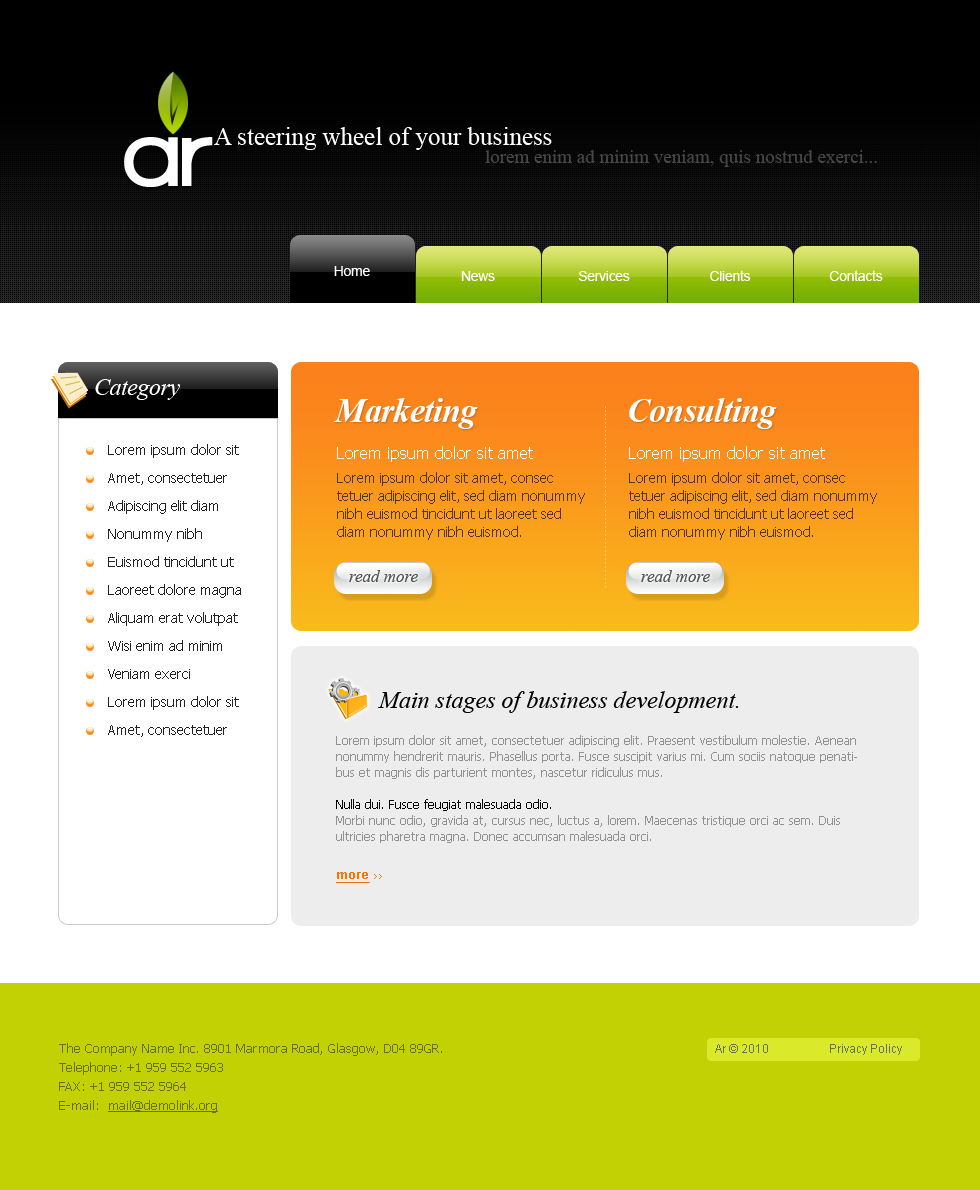
<style>
.page{position:relative;width:980px;height:1190px;background:#ffffff}
.page>*{position:absolute;margin:0}
.t1{font:98px "WalkwayBlack";color:#ffffff}
.t2{font:25px "TimesNewRomanPSMT";color:#ffffff}
.t3{font:19px "TimesNewRomanPSMT";color:#494949}
.t4{font:14px "ArialMT";letter-spacing:-0.02em;color:#ffffff}
.t5{font:24px "TimesNewRomanPS-ItalicMT";letter-spacing:-0.02em;color:#ffffff}
.t6{font:34px "TimesNewRomanPS-BoldItalicMT";letter-spacing:-0.02em;color:#ffffff}
.t7{font:14px/28px "Tahoma";color:#222222}
.t8{font:16px "Tahoma";color:#ffffff}
.t9{font:14px/18px "Tahoma";color:#503620}
.t10{font:17px "TimesNewRomanPS-ItalicMT";color:#555555}
.t11{font:24px "TimesNewRomanPS-ItalicMT";color:#000000}
.t12{font:12px/16px "Tahoma";color:#919191}
.t13{font:12px/16px "Tahoma";color:#000000}
.t14{font:13px "Arial-BoldMT";color:#fb7506;text-decoration:underline}
.t15{font:8px "Standard0754";color:#f08508;text-transform:uppercase}
.t16{font:13px/19px "Tahoma";color:#687004}
.t17{font:13px/19px "Tahoma";color:#687004;text-decoration:underline}
.t18{font:12px "ArialMT";color:#697546}
</style>
<div class="page">
<p class="t1" style="left:124px;top:137px;width:89px;height:50px">ar</p>
<p class="t2" style="left:214px;top:127px;width:338px;height:23px">A steering wheel of your business</p>
<p class="t3" style="left:485px;top:150px;width:392px;height:17px">lorem enim ad minim veniam, quis nostrud exerci...</p>
<p class="t4" style="left:334px;top:266px;width:36px;height:10px">Home</p>
<p class="t4" style="left:710px;top:270px;width:41px;height:11px">Clients</p>
<p class="t4" style="left:829px;top:270px;width:54px;height:11px">Contacts</p>
<p class="t4" style="left:461px;top:271px;width:34px;height:10px">News</p>
<p class="t4" style="left:578px;top:271px;width:52px;height:10px">Services</p>
<p class="t5" style="left:95px;top:379px;width:86px;height:21px">Category</p>
<p class="t6" style="left:333px;top:398px;width:145px;height:31px">Marketing</p>
<p class="t6" style="left:629px;top:398px;width:148px;height:31px">Consulting</p>
<p class="t7" style="left:108px;top:444px;width:133px;height:293px">Lorem ipsum dolor sit <br>Amet, consectetuer <br>Adipiscing elit diam <br>Nonummy nibh <br>Euismod tincidunt ut <br>Laoreet dolore magna <br>Aliquam erat volutpat <br>Wisi enim ad minim <br>Veniam exerci<br>Lorem ipsum dolor sit <br>Amet, consectetuer</p>
<p class="t8" style="left:337px;top:446px;width:196px;height:16px">Lorem ipsum dolor sit amet</p>
<p class="t8" style="left:629px;top:446px;width:196px;height:16px">Lorem ipsum dolor sit amet</p>
<p class="t9" style="left:337px;top:472px;width:248px;height:68px">Lorem ipsum dolor sit amet, consec<br>tetuer adipiscing elit, sed diam nonummy nibh euismod tincidunt ut laoreet sed diam nonummy nibh euismod.</p>
<p class="t9" style="left:629px;top:472px;width:248px;height:68px">Lorem ipsum dolor sit amet, consec<br>tetuer adipiscing elit, sed diam nonummy nibh euismod tincidunt ut laoreet sed diam nonummy nibh euismod.</p>
<p class="t10" style="left:349px;top:570px;width:69px;height:12px">read more</p>
<p class="t10" style="left:641px;top:570px;width:69px;height:12px">read more</p>
<p class="t11" style="left:378px;top:691px;width:361px;height:22px">Main stages of business development.</p>
<p class="t12" style="left:336px;top:735px;width:521px;height:108px">Lorem ipsum dolor sit amet, consectetuer adipiscing elit. Praesent vestibulum molestie. Aenean nonummy hendrerit mauris. Phasellus porta. Fusce suscipit varius mi. Cum sociis natoque penatibus et magnis dis parturient montes, nascetur ridiculus mus. <br><br><span class="t13">Nulla dui. Fusce feugiat malesuada odio.<br></span>Morbi nunc odio, gravida at, cursus nec, luctus a, lorem. Maecenas tristique orci ac sem. Duis ultricies pharetra magna. Donec accumsan malesuada orci.</p>
<p class="t14" style="left:336px;top:872px;width:46px;height:11px">more <span class="t15">&gt;&gt;</span></p>
<p class="t16" style="left:59px;top:1043px;width:383px;height:70px">The Company Name Inc. 8901 Marmora Road, Glasgow, D04 89GR.<br>Telephone: +1 959 552 5963<br>FAX: +1 959 552 5964<br>E-mail:  <span class="t17">mail@demolink.org</span></p>
<p class="t18" style="left:715px;top:1044px;width:187px;height:11px">Ar © 2010                    Privacy Policy</p>
</div>
